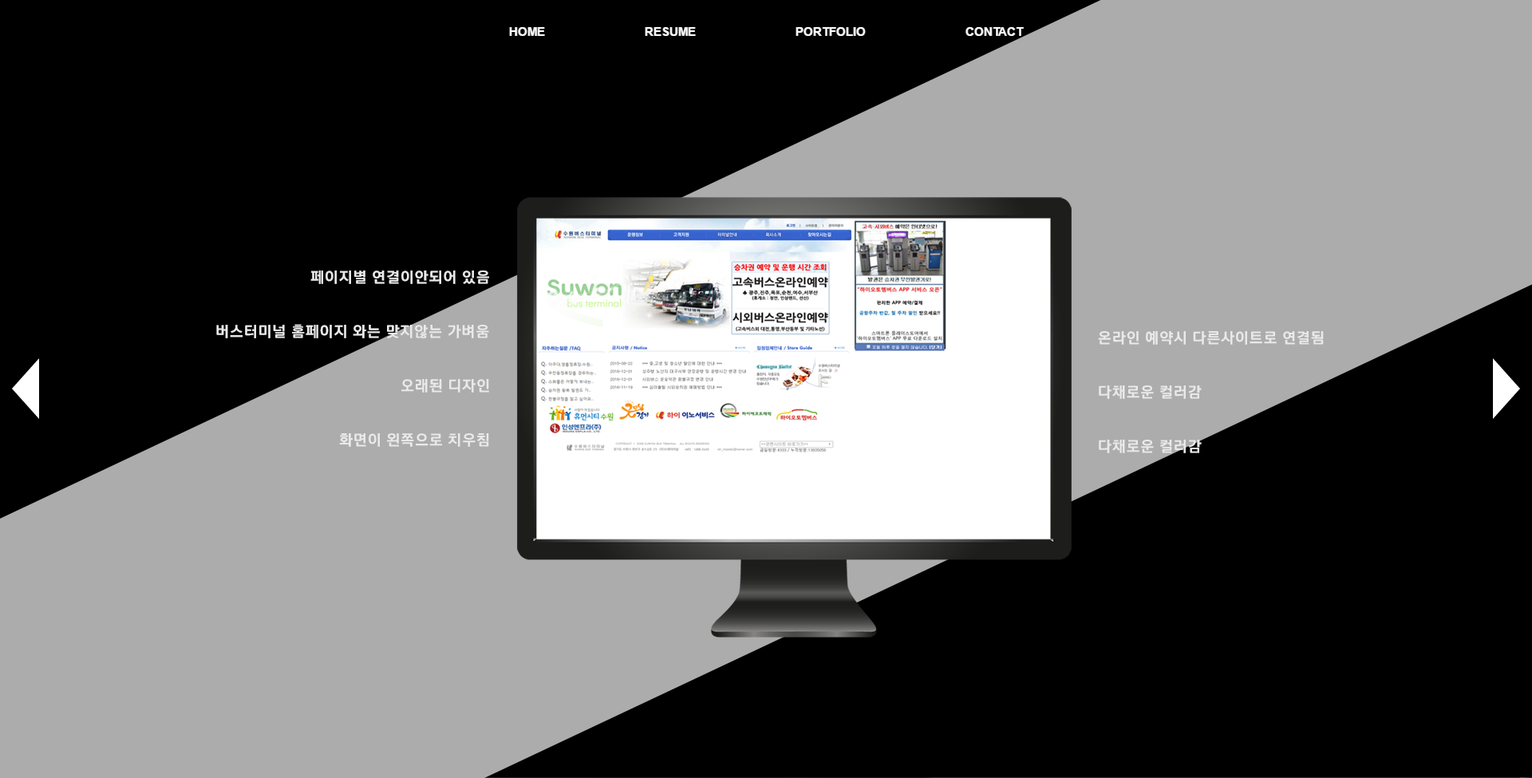
<style>
.page{position:relative;width:1532px;height:778px;background:#000000}
.page>*{position:absolute;margin:0}
.t1{font:14.4px "Typo_Factory_EB";letter-spacing:0.04em;color:#e9e9e9}
</style>
<div class="page">
<p class="t1" style="left:310px;top:271px;width:179px;height:13px">페이지별 연결이안되어 있음</p>
<p class="t1" style="left:216px;top:324px;width:273px;height:14px">버스터미널 홈페이지 와는 맞지않는 가벼움</p>
<p class="t1" style="left:1098px;top:331px;width:226px;height:14px">온라인 예약시 다른사이트로 연결됨</p>
<p class="t1" style="left:401px;top:379px;width:88px;height:14px">오래된 디자인</p>
<p class="t1" style="left:1099px;top:385px;width:103px;height:14px">다채로운 컬러감</p>
<p class="t1" style="left:339px;top:433px;width:150px;height:14px">화면이 왼쪽으로 치우침</p>
<p class="t1" style="left:1099px;top:440px;width:103px;height:13px">다채로운 컬러감</p>
</div>
